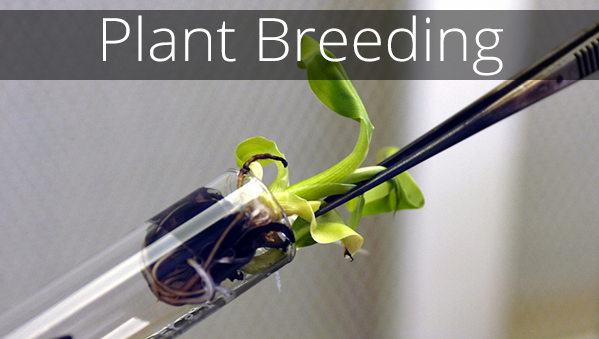
<style>
.page{position:relative;width:599px;height:339px}
.page>*{position:absolute;margin:0}
.t1{font:60px "OpenSans-Light";color:#ffffff;scale:1.03 1}
</style>
<div class="page">
<p class="t1" style="left:103px;top:15px;width:400px;height:61px">Plant Breeding</p>
</div>
